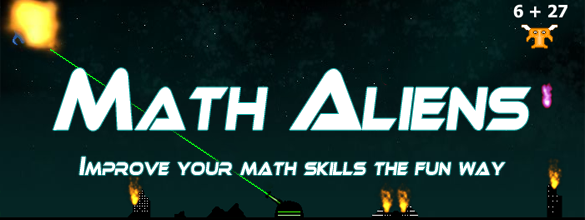
<style>
.page{position:relative;width:585px;height:220px}
.page>*{position:absolute;margin:0}
.t1{font:84px "Ethnocentric";letter-spacing:0.01em;color:#ffffff;font-variant:small-caps;font-style:italic;scale:0.71 1}
.t2{font:25.2px "Ethnocentric";letter-spacing:0.01em;color:#ffffff;font-variant:small-caps;font-style:italic;scale:0.71 1}
</style>
<div class="page">
<p class="t1" style="left:53px;top:68px;width:478px;height:63px">Math Aliens</p>
<p class="t2" style="left:79px;top:156px;width:427px;height:20px">Improve your math skills the fun way</p>
</div>
